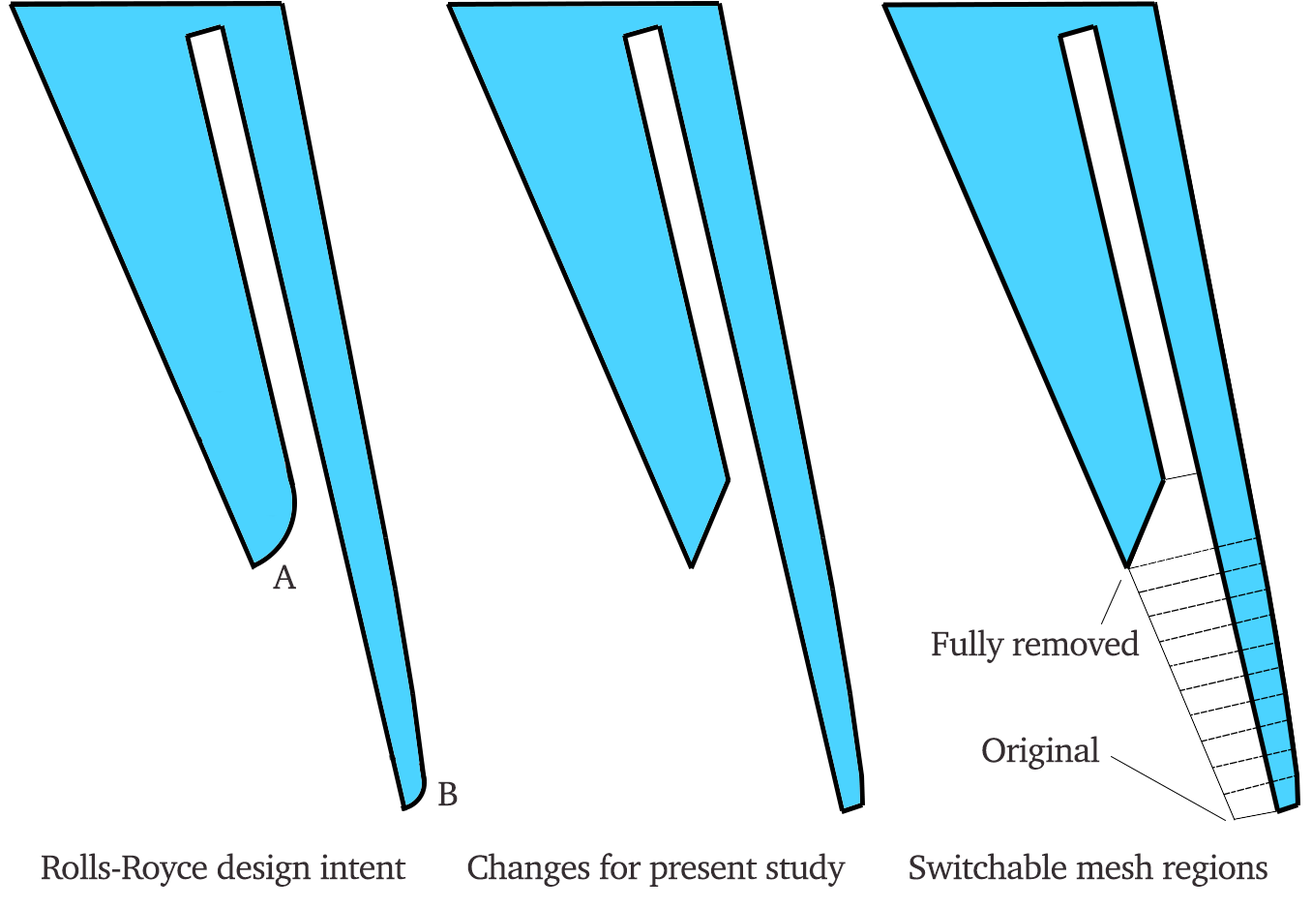
<style>
.page{position:relative;width:1312px;height:909px;background:#ffffff}
.page>*{position:absolute;margin:0}
.t1{font:34.8px "Charter-Roman";letter-spacing:-0.02em;color:#352e31}
</style>
<div class="page">
<p class="t1" style="left:273px;top:564px;width:23px;height:25px">A</p>
<p class="t1" style="left:931px;top:629px;width:209px;height:34px">Fully removed</p>
<p class="t1" style="left:982px;top:735px;width:118px;height:34px">Original</p>
<p class="t1" style="left:438px;top:781px;width:20px;height:25px">B</p>
<p class="t1" style="left:42px;top:853px;width:364px;height:33px">Rolls-Royce design intent</p>
<p class="t1" style="left:467px;top:853px;width:379px;height:33px">Changes for present study</p>
<p class="t1" style="left:910px;top:853px;width:358px;height:33px">Switchable mesh regions</p>
</div>
